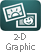
<style>
.page{position:relative;width:41px;height:52px;background:#ffffff}
.page>*{position:absolute;margin:0}
.t1{font:9px/10px "MyriadPro-Regular";letter-spacing:-0.015em;color:#878787}
</style>
<div class="page">
<p class="t1" style="left:6px;top:33px;width:29px;height:19px;text-align:center">2-D<br>Graphic</p>
</div>
